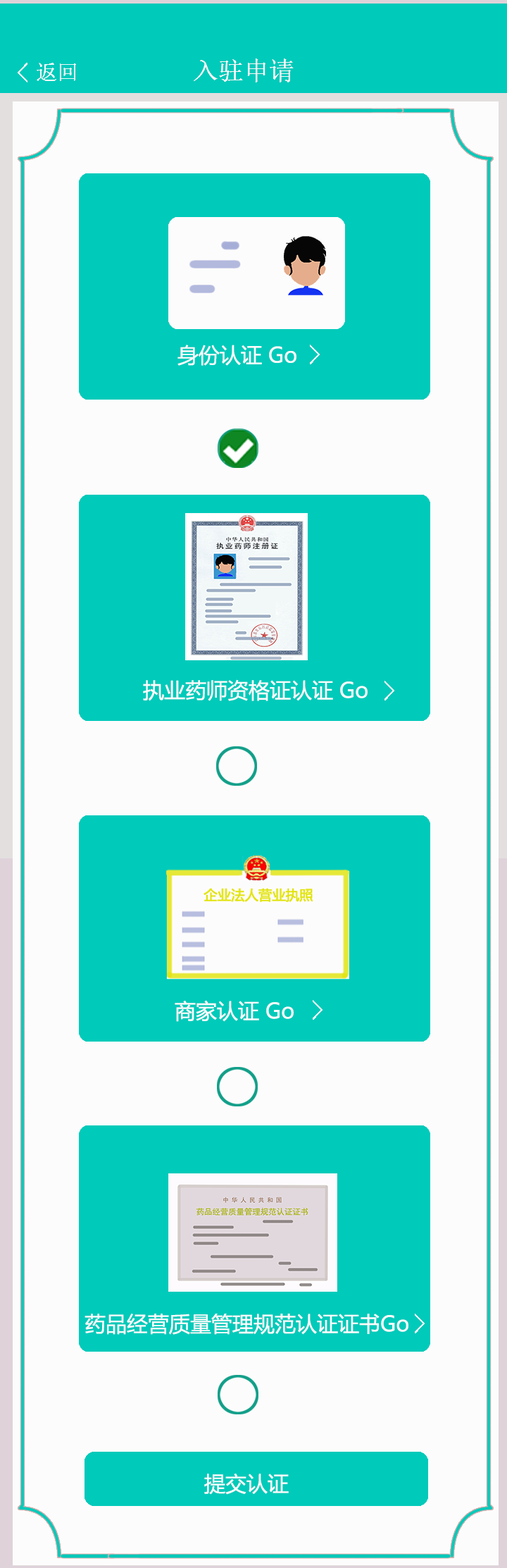
<style>
.page{position:relative;width:507px;height:1568px;background:#fdfcfc}
.page>*{position:absolute;margin:0}
.t1{font:21.1px "MicrosoftYaHei";color:#fdfcfc}
</style>
<div class="page">
<p class="t1" style="left:178px;top:345px;width:119px;height:21px">身份认证 Go</p>
<p class="t1" style="left:143px;top:679px;width:225px;height:22px">执业药师资格证认证 Go</p>
<p class="t1" style="left:175px;top:1000px;width:119px;height:22px">商家认证 Go</p>
<p class="t1" style="left:85px;top:1314px;width:324px;height:21px">药品经营质量管理规范认证证书Go</p>
<p class="t1" style="left:204px;top:1474px;width:85px;height:21px">提交认证</p>
</div>
